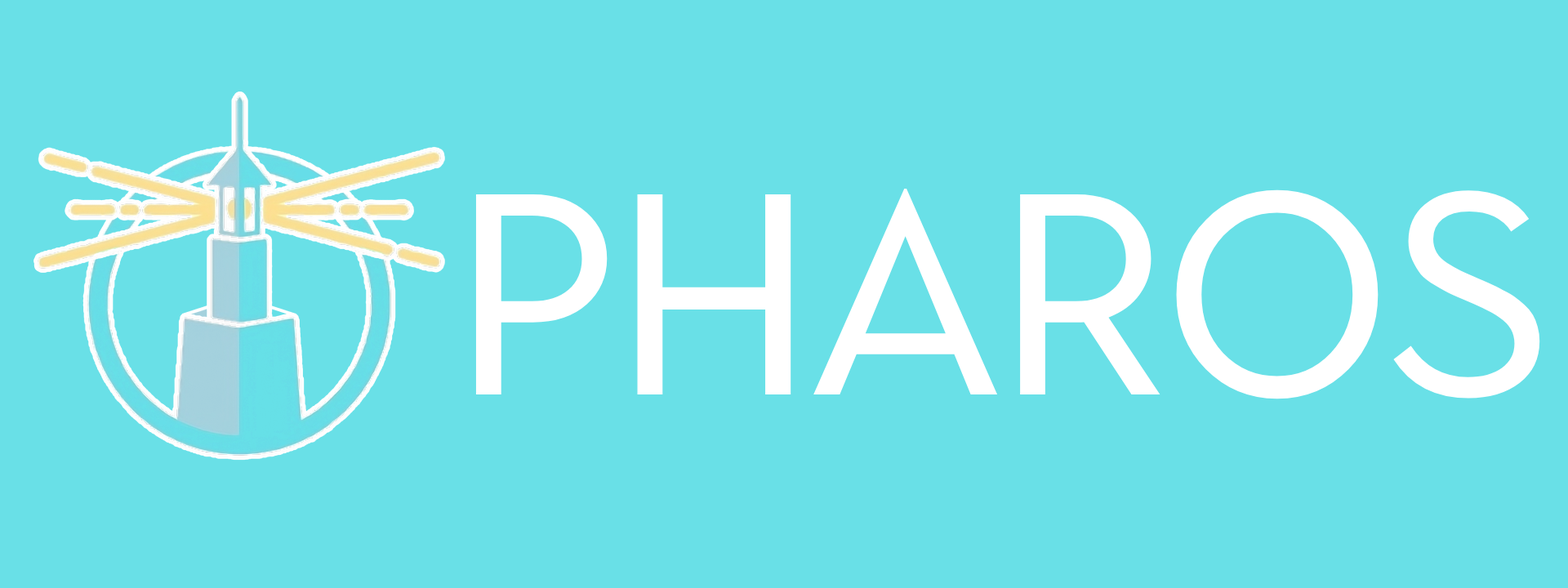
<style>
.page{position:relative;width:1568px;height:588px;background:#69e0e7}
.page>*{position:absolute;margin:0}
.t1{font:285.8px "Town10Display-Regular";color:#ffffff}
.t2{font:285.8px "Town10Display-Regular";color:#69e0e7}
</style>
<div class="page">
<p class="t1" style="left:475px;top:189px;width:1065px;height:210px"><span class="t2">P</span>haros</p>
</div>
